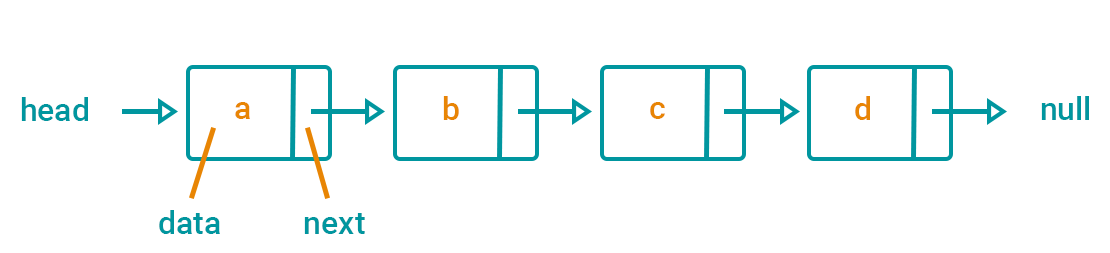
<style>
.page{position:relative;width:1110px;height:253px;background:#ffffff}
.page>*{position:absolute;margin:0}
.t1{font:32px "Roboto-Medium";color:#00969f}
.t2{font:32px "Roboto-Medium";color:#e88504}
</style>
<div class="page">
<p class="t1" style="left:21px;top:97px;width:67px;height:24px">head</p>
<p class="t2" style="left:235px;top:102px;width:15px;height:17px">a</p>
<p class="t2" style="left:443px;top:96px;width:16px;height:24px">b</p>
<p class="t2" style="left:650px;top:102px;width:15px;height:17px">c</p>
<p class="t2" style="left:855px;top:96px;width:15px;height:24px">d</p>
<p class="t1" style="left:1041px;top:96px;width:48px;height:24px">null</p>
<p class="t1" style="left:159px;top:210px;width:61px;height:24px">data</p>
<p class="t1" style="left:304px;top:213px;width:61px;height:21px">next</p>
</div>
